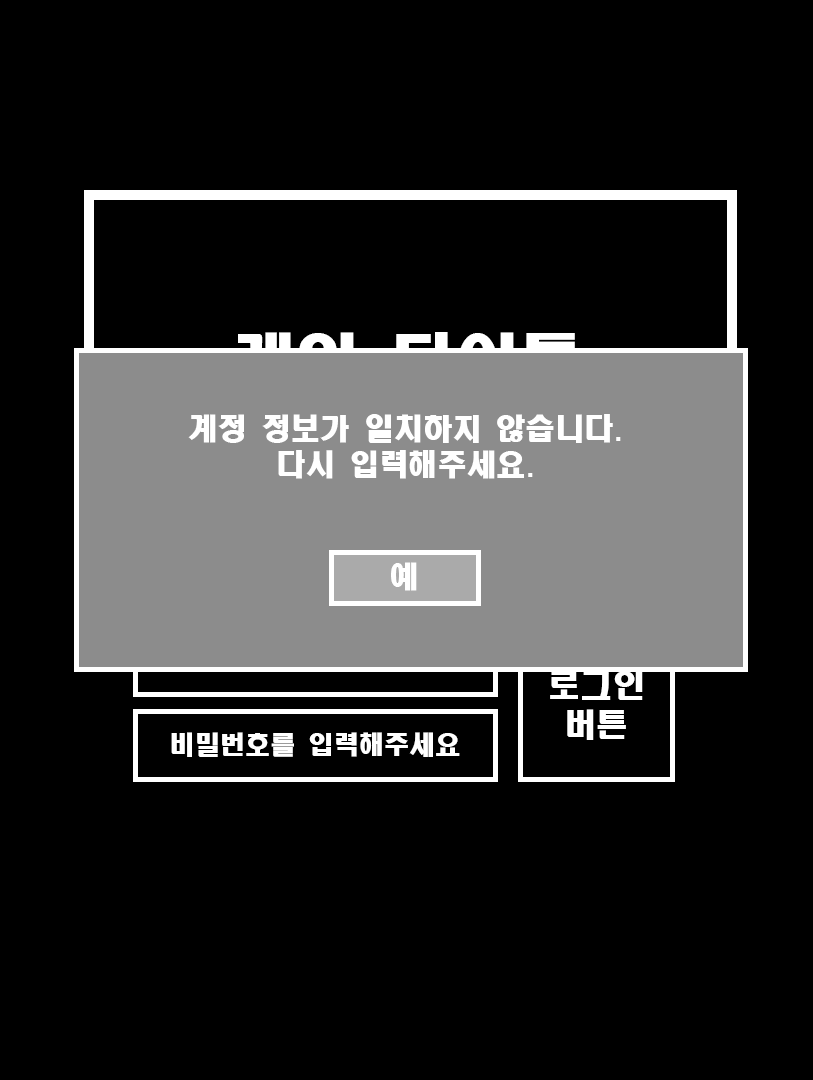
<style>
.page{position:relative;width:813px;height:1080px;background:#000000}
.page>*{position:absolute;margin:0}
.t1{font:64px "HeadlineR-HM"}
.t2{font:29.3px "HeadlineR-HM";color:#ffffff}
.t3{font:32px "HeadlineR-HM";color:#ffffff}
.t4{font:25.4px "HeadlineR-HM";color:#ffffff}
</style>
<div class="page">
<p class="t1" style="left:232px;top:332px;width:347px;height:62px">게임 타이틀</p>
<p class="t2" style="left:188px;top:414px;width:433px;height:65px;text-align:center">계정 정보가 일치하지 않습니다.<br>다시 입력해주세요.</p>
<p class="t2" style="left:391px;top:562px;width:26px;height:29px">예</p>
<p class="t3" style="left:550px;top:670px;width:93px;height:70px;text-align:center">로그인<br>버튼</p>
<p class="t4" style="left:171px;top:732px;width:289px;height:25px">비밀번호를 입력해주세요</p>
</div>
